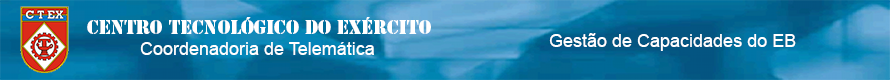
<style>
.page{position:relative;width:890px;height:80px}
.page>*{position:absolute;margin:0}
.t1{font:18px "StencilStd";color:#ffffff}
.t2{font:18px "ArialMT";color:#ffffff}
</style>
<div class="page">
<p class="t1" style="left:87px;top:17px;width:344px;height:17px">Centro Tecnológico do Exército</p>
<p class="t2" style="left:549px;top:33px;width:247px;height:18px">Gestão de Capacidades do EB</p>
<p class="t2" style="left:140px;top:42px;width:234px;height:13px">Coordenadoria de Telemática</p>
</div>
